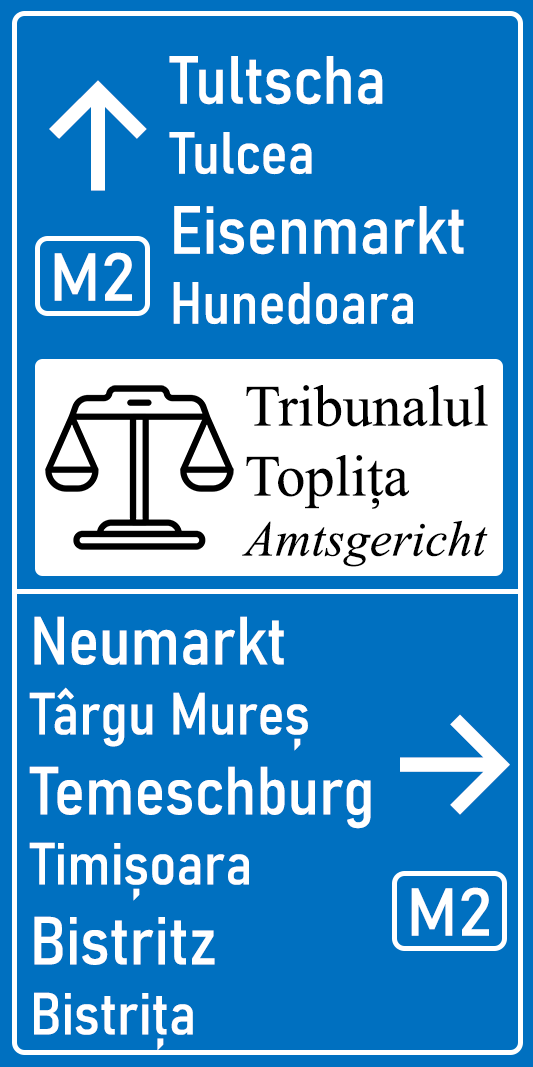
<style>
.page{position:relative;width:533px;height:1067px;background:#0070c0}
.page>*{position:absolute;margin:0}
.t1{font:66.7px "Bahnschrift-SemiCondensed";color:#ffffff}
.t2{font:58.3px "Bahnschrift-SemiCondensed";color:#ffffff}
.t3{font:150px "InterV-Medium";color:#ffffff}
.t4{font:66.7px "Bahnschrift";color:#ffffff}
.t5{font:58.3px "TimesNewRomanPSMT";color:#000000}
.t6{font:50px "TimesNewRomanPS-ItalicMT";color:#000000}
</style>
<div class="page">
<p class="t1" style="left:169px;top:56px;width:295px;height:269px">Tultscha<br><span class="t2">Tulcea<br></span>Eisenmarkt<br><span class="t2">Hunedoara</span></p>
<p class="t3" style="left:49px;top:80px;width:98px;height:111px">↑</p>
<p class="t4" style="left:54px;top:252px;width:78px;height:49px">M2</p>
<p class="t5" style="left:242px;top:385px;width:246px;height:182px">Tribunalul<br>Toplița<br><span class="t6">Amtsgericht</span></p>
<p class="t2" style="left:29px;top:616px;width:342px;height:435px"><span class="t1">Neumarkt<br></span>Târgu Mureș<br><span class="t1">Temeschburg<br></span>Timișoara<br><span class="t1">Bistritz<br></span>Bistrița</p>
<p class="t3" style="left:400px;top:714px;width:110px;height:101px">→</p>
<p class="t4" style="left:411px;top:887px;width:78px;height:49px">M2</p>
</div>
